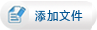
<style>
.page{position:relative;width:97px;height:30px}
.page>*{position:absolute;margin:0}
.t1{font:11.8px "MicrosoftYaHei";letter-spacing:0.12em;color:#025592;scale:0.92 1}
</style>
<div class="page">
<p class="t1" style="left:35px;top:10px;width:48px;height:12px">添加文件</p>
</div>
